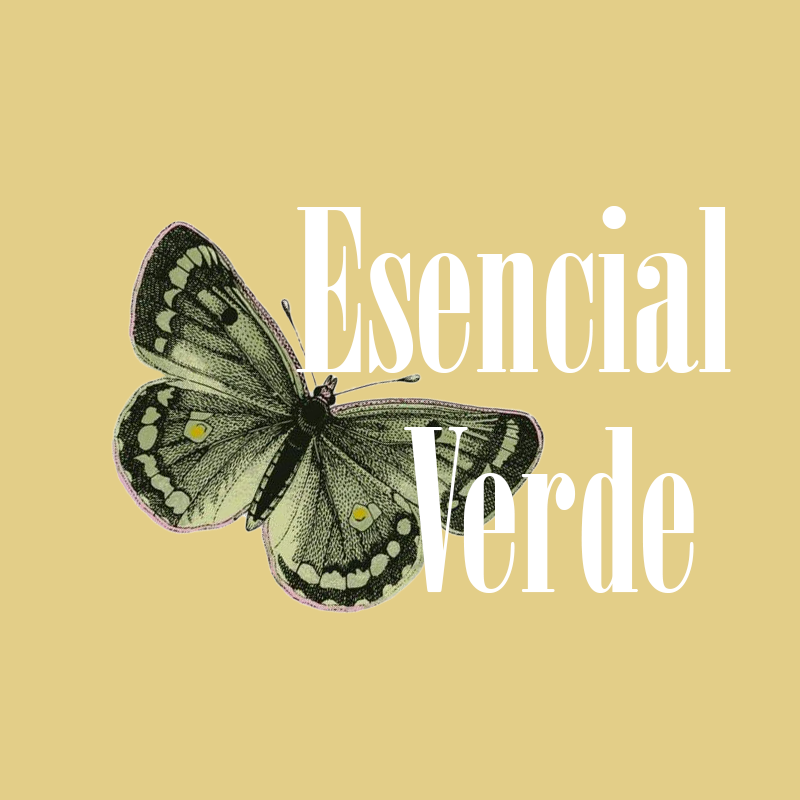
<style>
.page{position:relative;width:800px;height:800px;background:#e3ce88}
.page>*{position:absolute;margin:0}
.t1{font:225px/220px "Onyx";color:#ffffff}
</style>
<div class="page">
<p class="t1" style="left:296px;top:206px;width:435px;height:387px">Esencial <br>   Verde</p>
</div>
